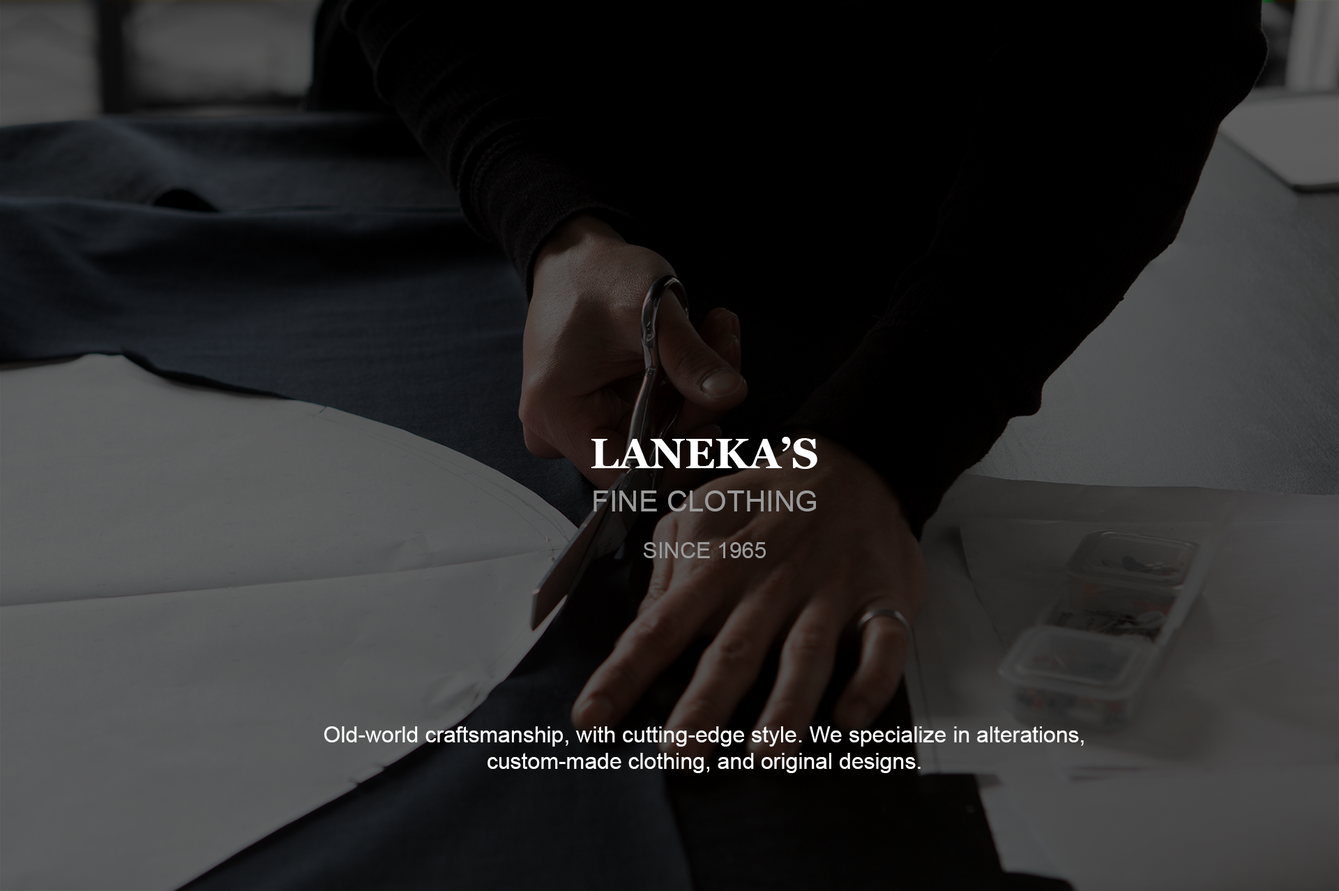
<style>
.page{position:relative;width:1339px;height:891px}
.page>*{position:absolute;margin:0}
.t1{font:41.8px "Georgia-Bold";color:#ffffff}
.t2{font:29.3px "ArialMT";color:#999999}
.t3{font:22.3px "ArialMT";color:#999999}
.t4{font:22.3px "ArialMT";color:#ffffff}
</style>
<div class="page">
<p class="t1" style="left:591px;top:437px;width:226px;height:32px">LANEKA’S</p>
<p class="t2" style="left:593px;top:490px;width:223px;height:68px;text-align:center">FINE CLOTHING<br><br><span class="t3">SINCE 1965</span></p>
<p class="t4" style="left:324px;top:726px;width:760px;height:47px;text-align:center">Old-world craftsmanship, with cutting-edge style. We specialize in alterations, custom-made clothing, and original designs.</p>
</div>
